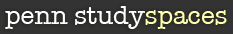
<style>
.page{position:relative;width:233px;height:34px;background:#333333}
.page>*{position:absolute;margin:0}
.t1{font:26px "AmericanTypewriter";color:#ffffff}
.t2{font:26px "AmericanTypewriter";color:#ffffb0}
</style>
<div class="page">
<p class="t1" style="left:5px;top:6px;width:222px;height:23px">penn study<span class="t2">spaces</span></p>
</div>
